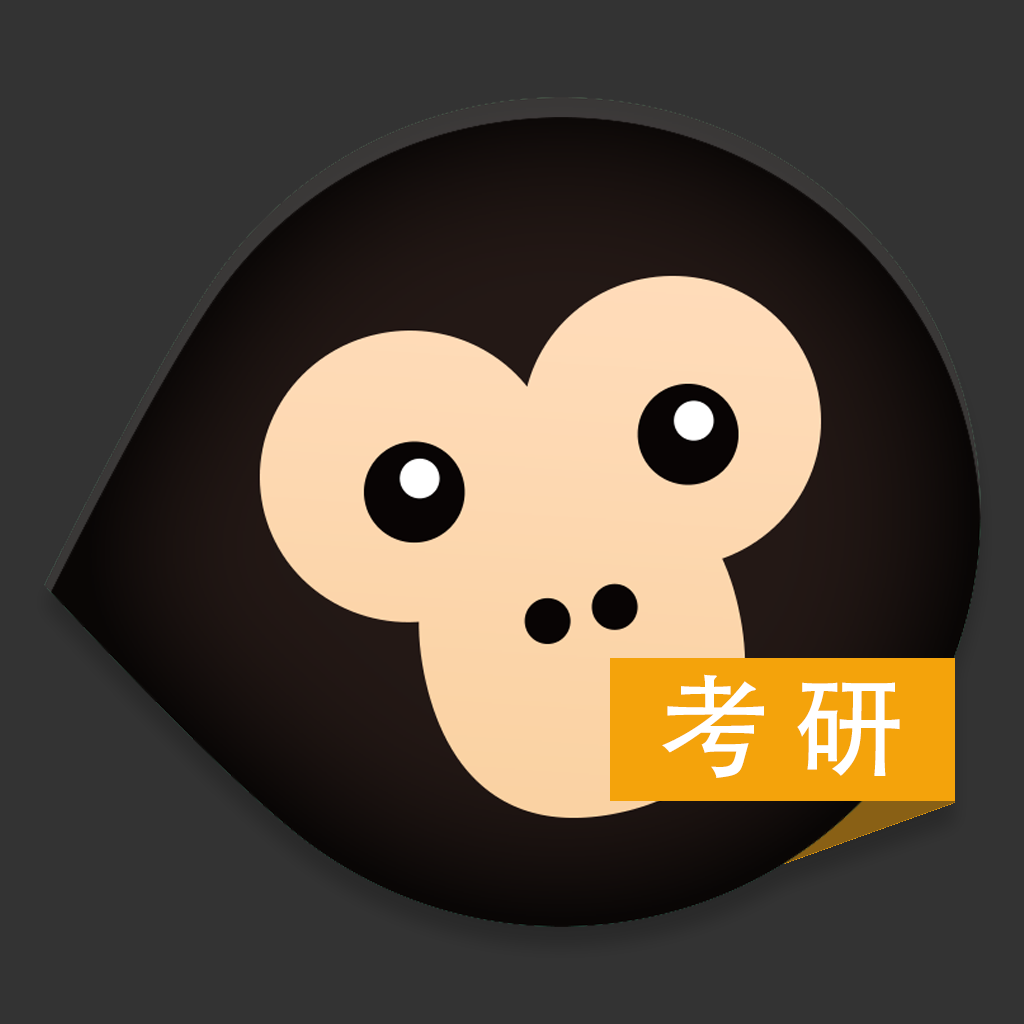
<style>
.page{position:relative;width:1024px;height:1024px;background:#333333}
.page>*{position:absolute;margin:0}
.t1{font:110px "AdobeHeitiStd-Regular";color:#ffffff}
</style>
<div class="page">
<p class="t1" style="left:662px;top:674px;width:238px;height:104px">考 研</p>
</div>
